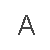
<style>
.page{position:relative;width:50px;height:50px;background:#ffffff}
.page>*{position:absolute;margin:0}
.t1{font:28.3px "ArialMT";color:#454545}
</style>
<div class="page">
<p class="t1" style="left:18px;top:15px;width:17px;height:20px">A</p>
</div>
